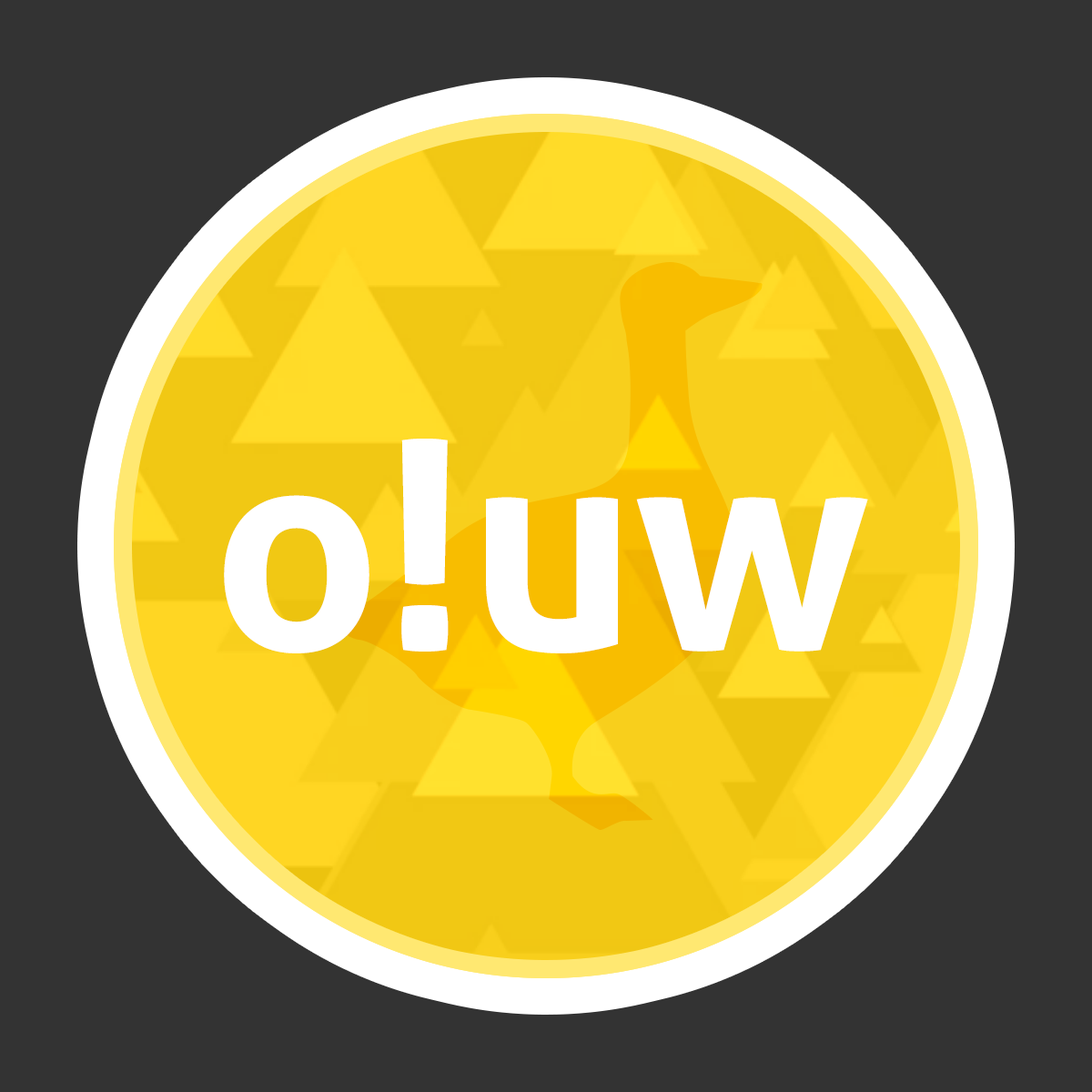
<style>
.page{position:relative;width:1092px;height:1092px;background:#333333}
.page>*{position:absolute;margin:0}
.t1{font:291.2px "Aller-Bold";color:#ffffff}
</style>
<div class="page">
<p class="t1" style="left:224px;top:439px;width:644px;height:214px">o!uw</p>
</div>
